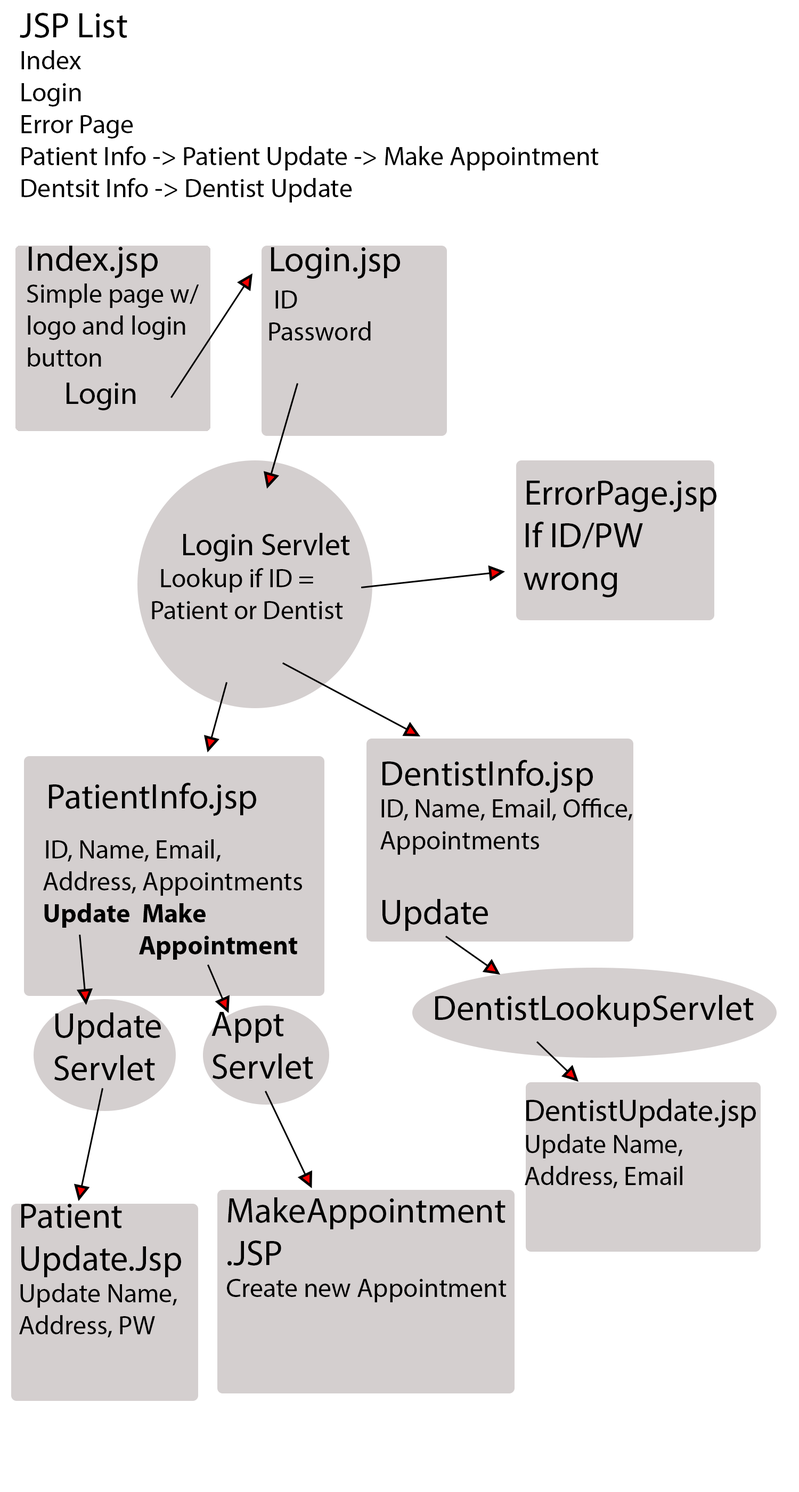
<style>
.page{position:relative;width:799px;height:1492px;background:#ffffff}
.page>*{position:absolute;margin:0}
.t1{font:26.6px "MyriadPro-Regular";color:#000000}
.t2{font:35.5px "MyriadPro-Regular";color:#000000}
.t3{font:31.1px "MyriadPro-Regular";color:#000000}
.t4{font:26.6px "MyriadPro-Bold";color:#000000}
</style>
<div class="page">
<p class="t1" style="left:20px;top:13px;width:579px;height:189px"><span class="t2">JSP List<br></span>Index<br>Login<br>Error Page<br>Patient Info -&gt; Patient Update -&gt; Make Appointment<br>Dentsit Info -&gt; Dentist Update</p>
<p class="t1" style="left:27px;top:246px;width:172px;height:164px"><span class="t2">Index.jsp<br></span>Simple page w/<br>logo and login<br>button<br><span class="t3">  Login</span></p>
<p class="t1" style="left:269px;top:247px;width:131px;height:93px"><span class="t2">Login.jsp<br> </span>ID<br>Password</p>
<p class="t2" style="left:524px;top:481px;width:193px;height:116px">ErrorPage.jsp<br>If ID/PW wrong</p>
<p class="t1" style="left:152px;top:533px;width:198px;height:86px"><span class="t3">Login Servlet<br></span>Lookup if ID = <br>Patient or Dentist</p>
<p class="t1" style="left:380px;top:760px;width:252px;height:171px"><span class="t2">DentistInfo.jsp<br></span>ID, Name, Email, Office,<br>Appointments<br><br><span class="t2">Update</span></p>
<p class="t2" style="left:49px;top:783px;width:207px;height:33px">PatientInfo.jsp</p>
<p class="t1" style="left:43px;top:839px;width:259px;height:121px">ID, Name, Email,<br>Address, Appointments<br><span class="t4">Update  Make<br>     Appointment</span></p>
<p class="t2" style="left:435px;top:995px;width:319px;height:32px">DentistLookupServlet</p>
<p class="t2" style="left:54px;top:1012px;width:107px;height:69px">Update<br>Servlet</p>
<p class="t2" style="left:212px;top:1012px;width:101px;height:67px">Appt<br>Servlet</p>
<p class="t1" style="left:525px;top:1099px;width:231px;height:89px"><span class="t3">DentistUpdate.jsp<br></span>Update Name, Address, Email</p>
<p class="t1" style="left:19px;top:1204px;width:162px;height:133px"><span class="t2">Patient<br>Update.Jsp<br></span>Update Name,<br>Address, PW</p>
<p class="t1" style="left:227px;top:1197px;width:280px;height:105px"><span class="t2">MakeAppointment<br>.JSP<br></span>Create new Appointment</p>
</div>
